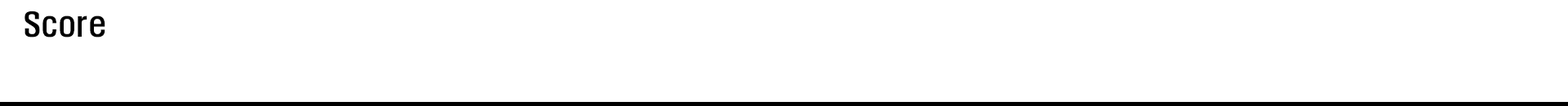
<style>
.page{position:relative;width:1568px;height:106px;background:#ffffff}
.page>*{position:absolute;margin:0}
.t1{font:29.4px "H2hdrM";color:#000000}
</style>
<div class="page">
<p class="t1" style="left:24px;top:11px;width:81px;height:27px">Score</p>
</div>
